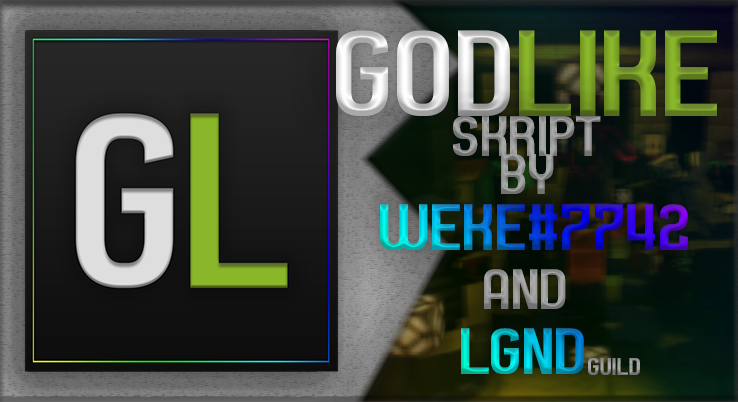
<style>
.page{position:relative;width:738px;height:402px}
.page>*{position:absolute;margin:0}
.t1{font:125px "Septacharge"}
.t2{font:58.3px/37.5px "Septacharge";color:#979797}
.t3{font:66.7px "Septacharge"}
.t4{font:58.3px "Septacharge";color:#979797}
.t5{font:25px "Septacharge";color:#959595}
</style>
<div class="page">
<p class="t1" style="left:336px;top:30px;width:381px;height:86px">GODLIKE</p>
<p class="t2" style="left:453px;top:116px;width:148px;height:78px;text-align:center">SKRIPT<br>BY</p>
<p class="t3" style="left:380px;top:204px;width:308px;height:46px">WEKE#7742</p>
<p class="t4" style="left:484px;top:269px;width:82px;height:40px">AND</p>
<p class="t3" style="left:461px;top:328px;width:123px;height:46px">LGND</p>
<p class="t5" style="left:588px;top:358px;width:52px;height:17px">GUILD</p>
</div>
